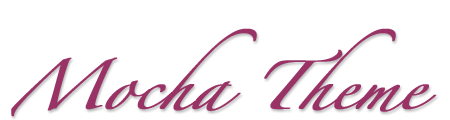
<style>
.page{position:relative;width:450px;height:120px;background:#ffffff}
.page>*{position:absolute;margin:0}
.t1{font:43.2px/26px "Zapfino";letter-spacing:-0.022em;color:#993366;font-weight:bold;font-style:italic;scale:1.11 1}
</style>
<div class="page">
<p class="t1" style="left:11px;top:28px;width:426px;height:89px">Mocha Theme</p>
</div>
